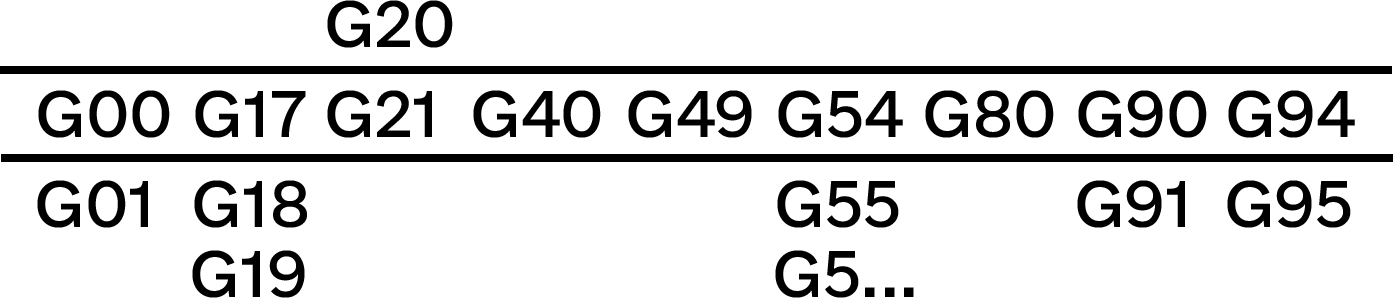
<style>
.page{position:relative;width:1393px;height:298px;background:#ffffff}
.page>*{position:absolute;margin:0}
.t1{font:62px "e-UkraineHead-Regular";color:#000000}
</style>
<div class="page">
<p class="t1" style="left:327px;top:0px;width:126px;height:48px">G20</p>
<p class="t1" style="left:38px;top:90px;width:132px;height:48px">G00</p>
<p class="t1" style="left:195px;top:90px;width:111px;height:48px">G17</p>
<p class="t1" style="left:327px;top:90px;width:105px;height:48px">G21</p>
<p class="t1" style="left:473px;top:90px;width:128px;height:48px">G40</p>
<p class="t1" style="left:628px;top:90px;width:124px;height:48px">G49</p>
<p class="t1" style="left:778px;top:90px;width:125px;height:48px">G54</p>
<p class="t1" style="left:925px;top:90px;width:129px;height:48px">G80</p>
<p class="t1" style="left:1078px;top:90px;width:129px;height:48px">G90</p>
<p class="t1" style="left:1228px;top:90px;width:127px;height:48px">G94</p>
<p class="t1" style="left:37px;top:180px;width:111px;height:48px">G01</p>
<p class="t1" style="left:194px;top:180px;width:113px;height:48px">G18</p>
<p class="t1" style="left:777px;top:180px;width:122px;height:48px">G55</p>
<p class="t1" style="left:1077px;top:180px;width:108px;height:48px">G91</p>
<p class="t1" style="left:1227px;top:180px;width:124px;height:48px">G95</p>
<p class="t1" style="left:192px;top:250px;width:113px;height:48px">G19</p>
<p class="t1" style="left:775px;top:250px;width:139px;height:48px">G5...</p>
</div>
